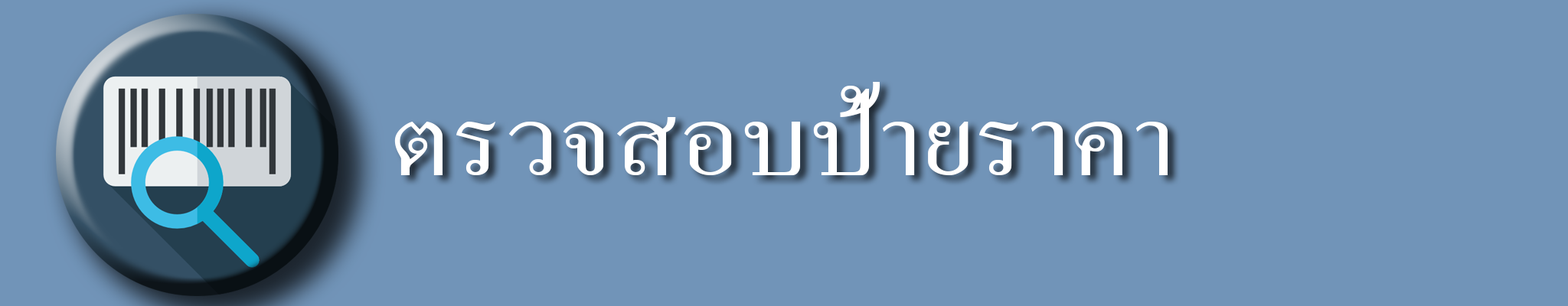
<style>
.page{position:relative;width:1568px;height:306px;background:#7194b8}
.page>*{position:absolute;margin:0}
.t1{font:133.7px "AngsanaNew";color:#ffffff;scale:1.15 1}
</style>
<div class="page">
<p class="t1" style="left:394px;top:82px;width:774px;height:93px">ตรวจสอบป้ายราคา</p>
</div>
